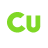
<style>
.page{position:relative;width:48px;height:48px;background:#ffffff}
.page>*{position:absolute;margin:0}
.t1{font:25px "PRIMETIME-Regular";color:#7fd826}
</style>
<div class="page">
<p class="t1" style="left:7px;top:12px;width:34px;height:21px">Cu</p>
</div>
